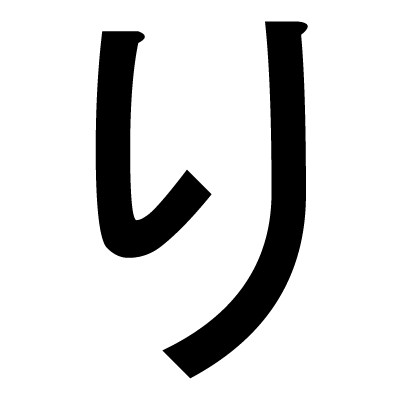
<style>
.page{position:relative;width:400px;height:400px;background:#ffffff}
.page>*{position:absolute;margin:0}
.t1{font:416.7px "MS-PGothic";color:#000000}
</style>
<div class="page">
<p class="t1" style="left:95px;top:21px;width:213px;height:358px">り</p>
</div>
